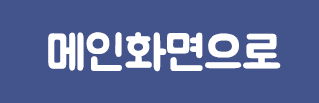
<style>
.page{position:relative;width:319px;height:103px;background:#43548c}
.page>*{position:absolute;margin:0}
.t1{font:48px "BMJUA";color:#ffffff}
</style>
<div class="page">
<p class="t1" style="left:48px;top:32px;width:233px;height:40px">메인화면으로</p>
</div>
